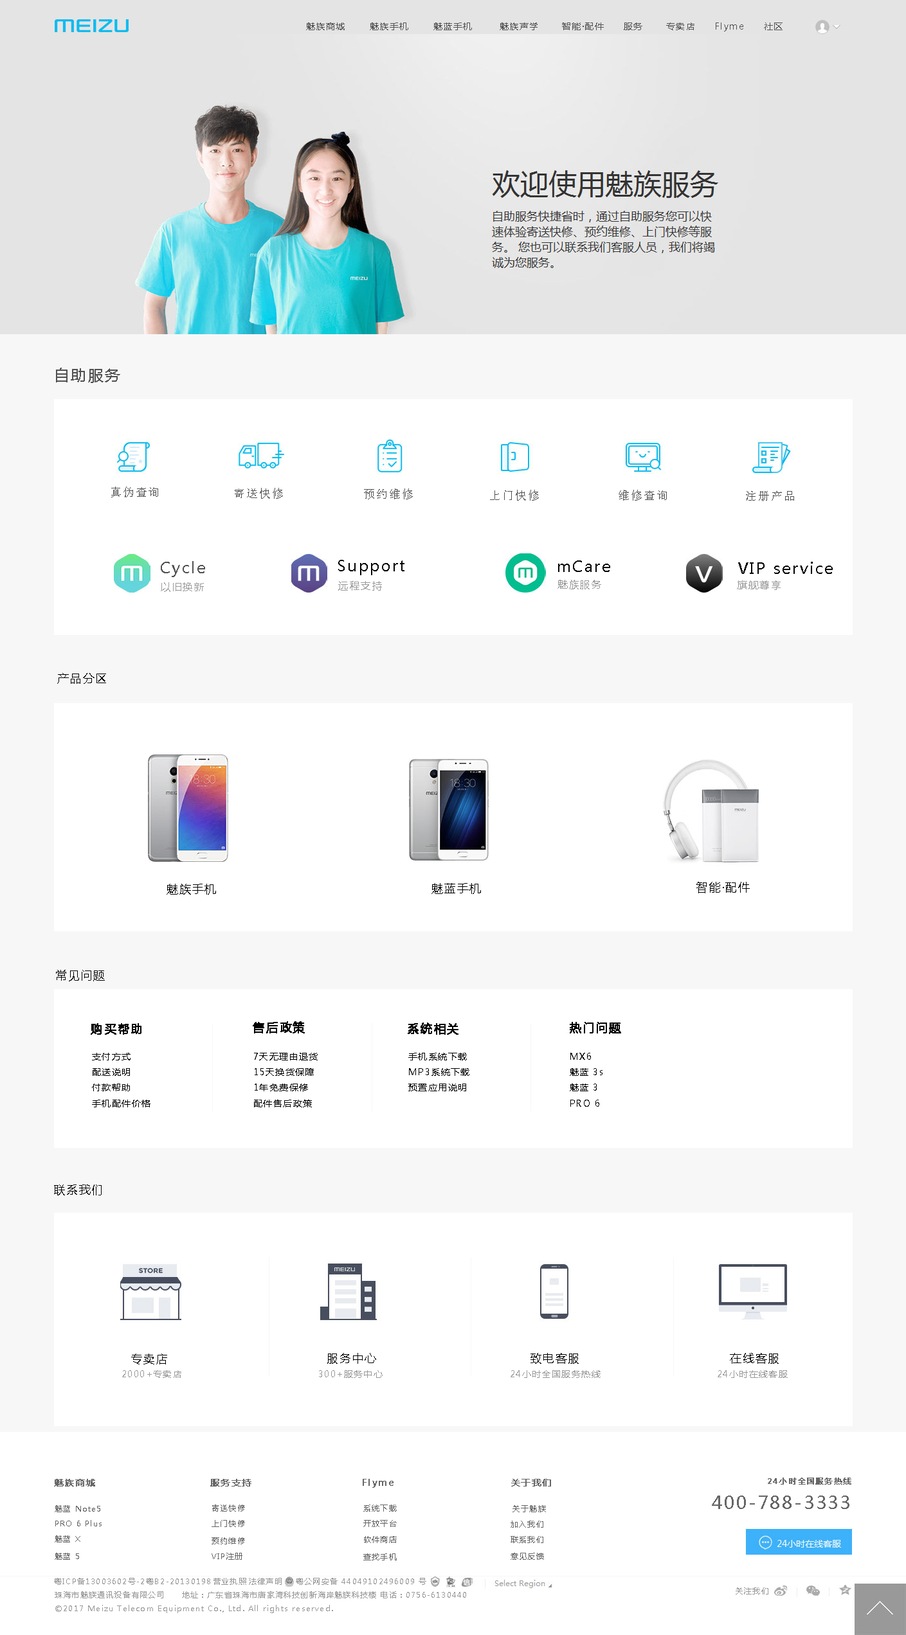
<style>
.page{position:relative;width:906px;height:1635px;background:#ffffff}
.page>*{position:absolute;margin:0}
.t1{font:9px "MicrosoftYaHei";letter-spacing:0.1em;color:#515151}
.t2{font:15.4px "MicrosoftYaHei";letter-spacing:0.1em;color:#515151}
.t3{font:11.6px "SimSun";letter-spacing:0.1em;color:#515151}
.t4{font:15.4px "MicrosoftYaHei";letter-spacing:0.1em;color:#000000}
.t5{font:10.3px "MicrosoftYaHei";letter-spacing:0.1em;color:#999999}
.t6{font:11.6px "MicrosoftYaHei";letter-spacing:0.1em;color:#000000}
.t7{font:11.6px "MicrosoftYaHei";letter-spacing:0.1em;color:#000000;font-weight:bold}
.t8{font:9px "MicrosoftYaHei";letter-spacing:0.1em;color:#000000}
.t9{font:9px "MicrosoftYaHei";letter-spacing:0.1em;color:#999999}
.t10{font:9px "MicrosoftYaHei";letter-spacing:0.1em;color:#666666;font-weight:bold}
.t11{font:7.7px "MicrosoftYaHei";letter-spacing:0.1em;color:#666666;font-weight:bold}
.t12{font:7.7px "MicrosoftYaHei";letter-spacing:0.1em;color:#666666}
.t13{font:18px "MicrosoftYaHei";letter-spacing:0.1em;color:#666666}
.t14{font:7.7px "MicrosoftYaHei";letter-spacing:0.1em;color:#999999}
</style>
<div class="page">
<p class="t1" style="left:306px;top:22px;width:39px;height:8px">魅族商城</p>
<p class="t1" style="left:370px;top:22px;width:38px;height:8px">魅族手机</p>
<p class="t1" style="left:433px;top:22px;width:39px;height:8px">魅蓝手机</p>
<p class="t1" style="left:500px;top:22px;width:37px;height:8px">魅族声学</p>
<p class="t1" style="left:562px;top:22px;width:42px;height:8px">智能·配件</p>
<p class="t1" style="left:624px;top:22px;width:18px;height:8px">服务</p>
<p class="t1" style="left:666px;top:22px;width:28px;height:8px">专卖店</p>
<p class="t1" style="left:716px;top:22px;width:27px;height:10px">Flyme</p>
<p class="t1" style="left:764px;top:22px;width:18px;height:8px">社区</p>
<p class="t2" style="left:56px;top:368px;width:64px;height:15px">自助服务</p>
<p class="t3" style="left:111px;top:487px;width:47px;height:11px">真伪查询</p>
<p class="t3" style="left:235px;top:488px;width:48px;height:11px">寄送快修</p>
<p class="t3" style="left:364px;top:489px;width:49px;height:11px">预约维修</p>
<p class="t3" style="left:490px;top:490px;width:49px;height:11px">上门快修</p>
<p class="t3" style="left:618px;top:490px;width:49px;height:11px">维修查询</p>
<p class="t3" style="left:746px;top:491px;width:48px;height:10px">注册产品</p>
<p class="t2" style="left:161px;top:561px;width:44px;height:16px">Cycle</p>
<p class="t4" style="left:338px;top:560px;width:66px;height:15px">Support</p>
<p class="t4" style="left:558px;top:561px;width:52px;height:11px">mCare</p>
<p class="t4" style="left:738px;top:562px;width:95px;height:12px">VIP service</p>
<p class="t5" style="left:338px;top:581px;width:44px;height:10px">远程支持</p>
<p class="t5" style="left:557px;top:580px;width:44px;height:10px">魅族服务</p>
<p class="t5" style="left:737px;top:580px;width:43px;height:10px">旗舰尊享</p>
<p class="t5" style="left:161px;top:582px;width:43px;height:10px">以旧换新</p>
<p class="t6" style="left:57px;top:673px;width:49px;height:11px">产品分区</p>
<p class="t6" style="left:696px;top:881px;width:54px;height:13px">智能·配件</p>
<p class="t6" style="left:166px;top:884px;width:50px;height:11px">魅族手机</p>
<p class="t6" style="left:431px;top:883px;width:50px;height:11px">魅蓝手机</p>
<p class="t6" style="left:56px;top:970px;width:49px;height:12px">常见问题</p>
<p class="t7" style="left:91px;top:1023px;width:50px;height:12px">购买帮助</p>
<p class="t7" style="left:253px;top:1022px;width:52px;height:12px">售后政策</p>
<p class="t7" style="left:408px;top:1023px;width:50px;height:12px">系统相关</p>
<p class="t7" style="left:570px;top:1022px;width:51px;height:12px">热门问题</p>
<p class="t8" style="left:92px;top:1053px;width:38px;height:8px">支付方式</p>
<p class="t8" style="left:254px;top:1053px;width:64px;height:8px">7天无理由退货</p>
<p class="t8" style="left:408px;top:1053px;width:59px;height:8px">手机系统下载</p>
<p class="t8" style="left:570px;top:1053px;width:21px;height:7px">MX6</p>
<p class="t8" style="left:93px;top:1068px;width:37px;height:8px">配送说明</p>
<p class="t8" style="left:255px;top:1068px;width:59px;height:8px">15天换货保障</p>
<p class="t8" style="left:409px;top:1068px;width:60px;height:8px">MP3系统下载</p>
<p class="t8" style="left:570px;top:1068px;width:32px;height:8px">魅蓝 3s</p>
<p class="t8" style="left:92px;top:1084px;width:38px;height:8px">付款帮助</p>
<p class="t8" style="left:255px;top:1084px;width:53px;height:8px">1年免费保修</p>
<p class="t8" style="left:408px;top:1084px;width:58px;height:8px">预置应用说明</p>
<p class="t8" style="left:570px;top:1084px;width:27px;height:8px">魅蓝 3</p>
<p class="t8" style="left:92px;top:1100px;width:58px;height:8px">手机配件价格</p>
<p class="t8" style="left:254px;top:1100px;width:58px;height:8px">配件售后政策</p>
<p class="t8" style="left:570px;top:1100px;width:29px;height:7px">PRO 6</p>
<p class="t6" style="left:54px;top:1185px;width:48px;height:11px">联系我们</p>
<p class="t6" style="left:131px;top:1354px;width:36px;height:11px">专卖店</p>
<p class="t6" style="left:327px;top:1353px;width:49px;height:11px">服务中心</p>
<p class="t6" style="left:530px;top:1353px;width:49px;height:11px">致电客服</p>
<p class="t6" style="left:730px;top:1353px;width:49px;height:11px">在线客服</p>
<p class="t9" style="left:122px;top:1371px;width:59px;height:7px">2000+专卖店</p>
<p class="t9" style="left:319px;top:1371px;width:63px;height:7px">300+服务中心</p>
<p class="t9" style="left:510px;top:1371px;width:90px;height:7px">24小时全国服务热线</p>
<p class="t9" style="left:717px;top:1371px;width:71px;height:7px">24小时在线客服</p>
<p class="t10" style="left:54px;top:1479px;width:41px;height:8px">魅族商城</p>
<p class="t10" style="left:210px;top:1479px;width:41px;height:8px">服务支持</p>
<p class="t10" style="left:363px;top:1479px;width:30px;height:9px">Flyme</p>
<p class="t10" style="left:511px;top:1479px;width:40px;height:8px">关于我们</p>
<p class="t11" style="left:768px;top:1478px;width:83px;height:7px">24小时全国服务热线</p>
<p class="t12" style="left:55px;top:1506px;width:45px;height:7px">魅蓝 Note5</p>
<p class="t12" style="left:212px;top:1505px;width:33px;height:7px">寄送快修</p>
<p class="t12" style="left:363px;top:1505px;width:34px;height:7px">系统下载</p>
<p class="t12" style="left:512px;top:1506px;width:34px;height:7px">关于魅族</p>
<p class="t13" style="left:712px;top:1496px;width:137px;height:13px">400-788-3333</p>
<p class="t12" style="left:55px;top:1520px;width:47px;height:7px">PRO 6 Plus</p>
<p class="t12" style="left:212px;top:1520px;width:33px;height:7px">上门快修</p>
<p class="t12" style="left:363px;top:1520px;width:34px;height:7px">开放平台</p>
<p class="t12" style="left:510px;top:1521px;width:33px;height:7px">加入我们</p>
<p class="t12" style="left:55px;top:1536px;width:25px;height:7px">魅蓝 X</p>
<p class="t12" style="left:212px;top:1538px;width:33px;height:7px">预约维修</p>
<p class="t12" style="left:364px;top:1536px;width:33px;height:8px">软件商店</p>
<p class="t12" style="left:510px;top:1536px;width:33px;height:8px">联系我们</p>
<p class="t12" style="left:55px;top:1553px;width:24px;height:7px">魅蓝 5</p>
<p class="t12" style="left:212px;top:1553px;width:30px;height:7px">VIP注册</p>
<p class="t12" style="left:363px;top:1554px;width:34px;height:7px">查找手机</p>
<p class="t12" style="left:510px;top:1553px;width:34px;height:7px">意见反馈</p>
<p class="t14" style="left:54px;top:1578px;width:90px;height:7px">粤ICP备13003602号-2</p>
<p class="t14" style="left:146px;top:1578px;width:64px;height:7px">粤B2-20130198</p>
<p class="t14" style="left:213px;top:1578px;width:33px;height:7px">营业执照</p>
<p class="t14" style="left:249px;top:1578px;width:33px;height:7px">法律声明</p>
<p class="t14" style="left:296px;top:1578px;width:130px;height:7px">粤公网安备 44049102496009 号</p>
<p class="t14" style="left:735px;top:1588px;width:33px;height:7px">关注我们</p>
<p class="t14" style="left:55px;top:1592px;width:411px;height:7px">珠海市魅族通讯设备有限公司     地址：广东省珠海市唐家湾科技创新海岸魅族科技楼 电话：0756-6130440</p>
<p class="t14" style="left:55px;top:1605px;width:278px;height:9px">©2017 Meizu Telecom Equipment Co., Ltd. All rights reserved.</p>
</div>
